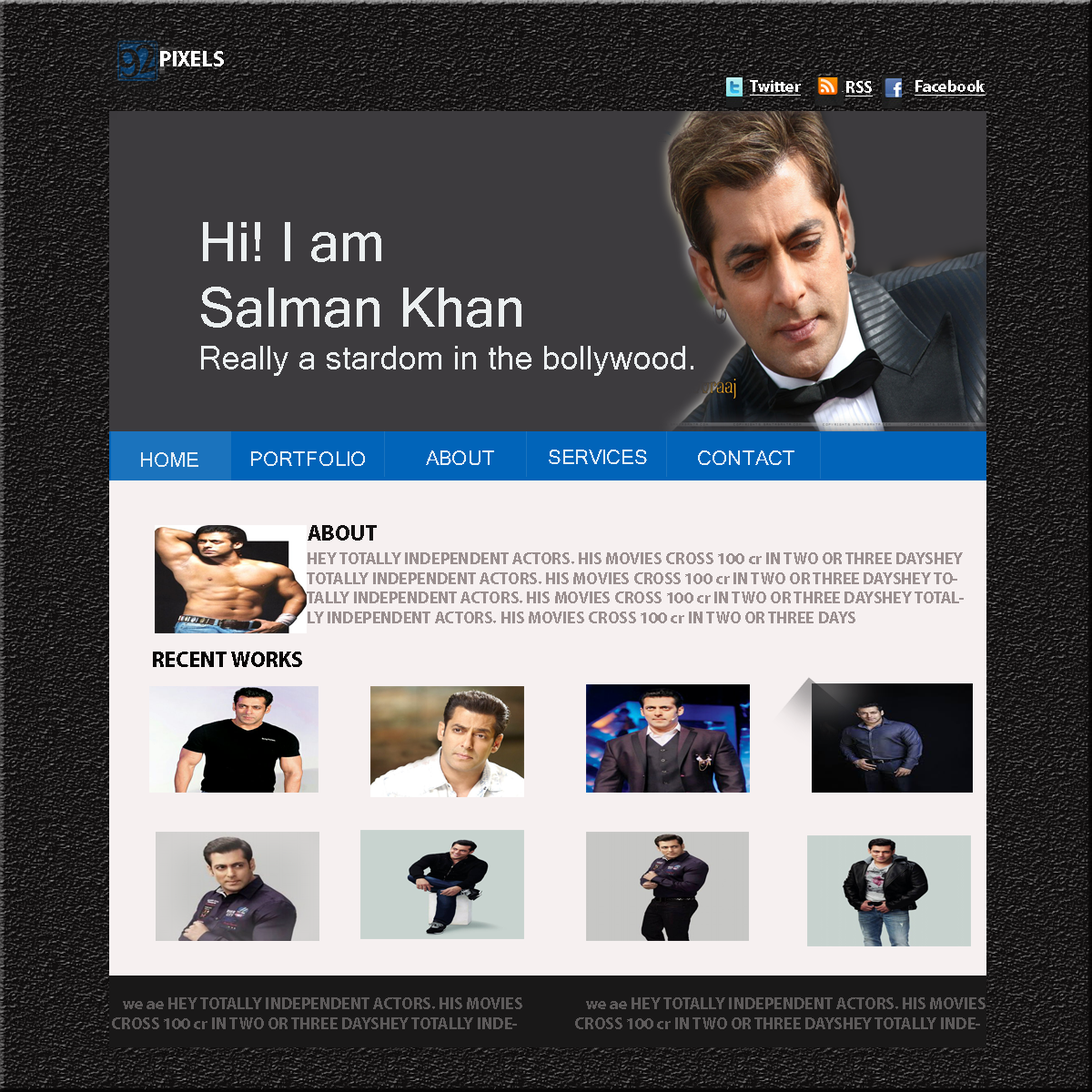
<style>
.page{position:relative;width:1092px;height:1092px}
.page>*{position:absolute;margin:0}
.t1{font:21.8px "MyriadPro-Bold";color:#ffffff}
.t2{font:16.4px "MyriadPro-Bold";color:#ffffff;text-decoration:underline}
.t3{font:54.6px "MicrosoftSansSerif";color:#ebeff0}
.t4{font:21.8px "MicrosoftSansSerif";color:#677173}
.t5{font:32.8px "MicrosoftSansSerif";color:#ebeff0}
.t6{font:10px "MicrosoftSansSerif";color:#ebeff0}
.t7{font:19.9px "MicrosoftSansSerif";color:#e2ecf4}
.t8{font:29.9px "MicrosoftSansSerif";color:#0164b9}
.t9{font:21.8px "MyriadPro-Bold";color:#131111}
.t10{font:16.4px "MyriadPro-Bold";color:#9a8f8f}
.t11{font:21.8px "MyriadPro-Bold";color:#070505}
.t12{font:16.4px "MyriadPro-Bold";color:#5d5a5a}
.t13{font:21.8px "MyriadPro-Bold";color:#5d5a5a}
</style>
<div class="page">
<p class="t1" style="left:160px;top:51px;width:64px;height:15px">PIXELS</p>
<p class="t2" style="left:750px;top:80px;width:51px;height:16px">Twitter</p>
<p class="t2" style="left:845px;top:81px;width:28px;height:15px">RSS</p>
<p class="t2" style="left:915px;top:80px;width:71px;height:16px">Facebook</p>
<p class="t3" style="left:201px;top:222px;width:320px;height:106px"><span class="t4"><br>               </span>Hi! I am<br>     Salman Khan</p>
<p class="t5" style="left:201px;top:346px;width:492px;height:30px"><span class="t6">           </span>Really a stardom in the bollywood.</p>
<p class="t7" style="left:549px;top:450px;width:98px;height:14px"><span class="t8">    </span>SERVICES</p>
<p class="t7" style="left:141px;top:452px;width:57px;height:15px"><span class="t8">    </span>HOME</p>
<p class="t7" style="left:251px;top:451px;width:114px;height:15px"><span class="t8">    </span>PORTFOLIO</p>
<p class="t7" style="left:426px;top:450px;width:68px;height:15px"><span class="t8">    </span>ABOUT</p>
<p class="t7" style="left:698px;top:450px;width:96px;height:15px"><span class="t8">    </span>CONTACT</p>
<p class="t9" style="left:308px;top:525px;width:69px;height:16px">ABOUT</p>
<p class="t10" style="left:307px;top:552px;width:657px;height:71px">HEY TOTALLY INDEPENDENT ACTORS. HIS MOVIES CROSS 100 cr IN TWO OR THREE DAYSHEY TOTALLY INDEPENDENT ACTORS. HIS MOVIES CROSS 100 cr IN TWO OR THREE DAYSHEY TOTALLY INDEPENDENT ACTORS. HIS MOVIES CROSS 100 cr IN TWO OR THREE DAYSHEY TOTALLY INDEPENDENT ACTORS. HIS MOVIES CROSS 100 cr IN TWO OR THREE DAYS</p>
<p class="t11" style="left:153px;top:652px;width:149px;height:15px">RECENT WORKS</p>
<p class="t12" style="left:112px;top:997px;width:410px;height:32px"><span class="t13">  </span> we ae HEY TOTALLY INDEPENDENT ACTORS. HIS MOVIES CROSS 100 cr IN TWO OR THREE DAYSHEY TOTALLY INDEPENDENT ACTORS. HIS MOVIES CROSS 100 cr IN TWO OR THREE DAYS</p>
<p class="t12" style="left:575px;top:997px;width:411px;height:32px"><span class="t13">  </span> we ae HEY TOTALLY INDEPENDENT ACTORS. HIS MOVIES CROSS 100 cr IN TWO OR THREE DAYSHEY TOTALLY INDEPENDENT ACTORS. HIS MOVIES CROSS 100 cr IN TWO OR THREE DAYS</p>
</div>
